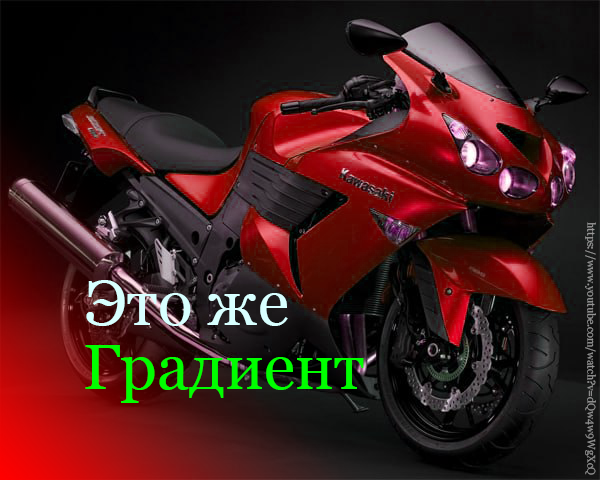
<style>
.page{position:relative;width:600px;height:480px}
.page>*{position:absolute;margin:0}
.t1{font:10.7px "Georgia";color:#959595}
.t2{font:64px "Georgia";color:#d8ffff}
.t3{font:64px "Georgia";color:#00ff00}
</style>
<div class="page">
<p class="t1" style="left:585px;top:222px;width:11px;height:253px;rotate:90deg">https://www.youtube.com/watch?v=dQw4w9WgXcQ</p>
<p class="t2" style="left:86px;top:280px;width:202px;height:46px">Это же</p>
<p class="t3" style="left:85px;top:345px;width:279px;height:58px">Градиент</p>
</div>
